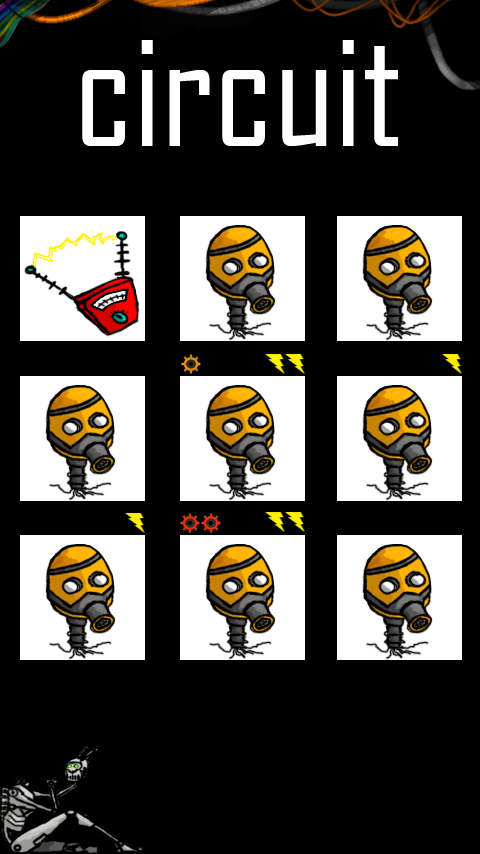
<style>
.page{position:relative;width:480px;height:854px;background:#000000}
.page>*{position:absolute;margin:0}
.t1{font:160px "AgencyFB-Reg";color:#ffffff}
</style>
<div class="page">
<p class="t1" style="left:82px;top:40px;width:316px;height:106px">circuit</p>
</div>
